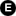
<style>
.page{position:relative;width:16px;height:16px;background:#000000}
.page>*{position:absolute;margin:0}
.t1{font:10.9px "Montserrat-Regular";color:#ffffff;scale:1.12 1}
</style>
<div class="page">
<p class="t1" style="left:5px;top:3px;width:7px;height:9px">E</p>
</div>
